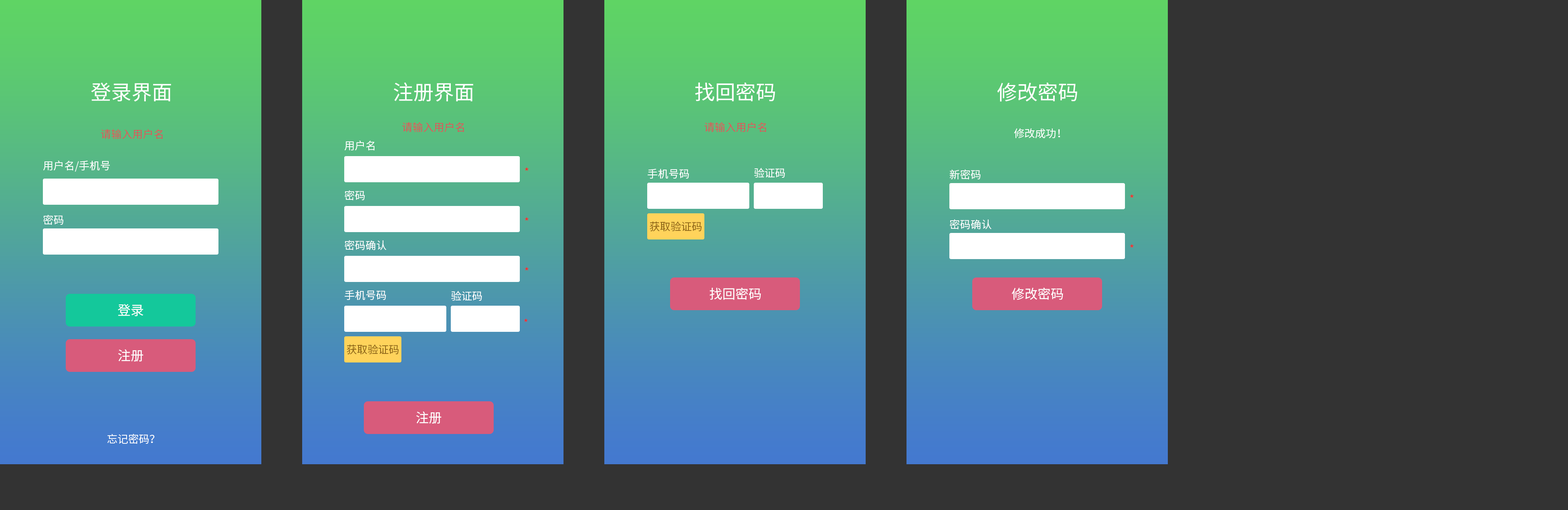
<style>
.page{position:relative;width:1568px;height:510px;background:#333333}
.page>*{position:absolute;margin:0}
.t1{font:20.4px "NotoSansHans-Regular";color:#ffffff}
.t2{font:10.6px "NotoSansHans-Regular";color:#d85b5b}
.t3{font:10.6px "NotoSansHans-Regular";color:#ffffff}
.t4{font:10.6px "NotoSansHans-Regular";color:#ff2424}
.t5{font:10.6px "NotoSansHans-Regular";color:#8e6618}
.t6{font:13.1px "NotoSansHans-Regular";color:#ffffff}
</style>
<div class="page">
<p class="t1" style="left:91px;top:82px;width:80px;height:20px">登录界面</p>
<p class="t1" style="left:394px;top:82px;width:79px;height:20px">注册界面</p>
<p class="t1" style="left:695px;top:82px;width:80px;height:19px">找回密码</p>
<p class="t1" style="left:997px;top:82px;width:80px;height:20px">修改密码</p>
<p class="t2" style="left:402px;top:122px;width:62px;height:10px">请输入用户名</p>
<p class="t2" style="left:704px;top:122px;width:62px;height:10px">请输入用户名</p>
<p class="t2" style="left:101px;top:129px;width:62px;height:10px">请输入用户名</p>
<p class="t3" style="left:1014px;top:128px;width:46px;height:10px">修改成功！</p>
<p class="t3" style="left:345px;top:140px;width:29px;height:10px">用户名</p>
<p class="t3" style="left:43px;top:160px;width:67px;height:12px">用户名/手机号</p>
<p class="t4" style="left:525px;top:167px;width:4px;height:4px">*</p>
<p class="t3" style="left:648px;top:169px;width:41px;height:9px">手机号码</p>
<p class="t3" style="left:754px;top:168px;width:31px;height:10px">验证码</p>
<p class="t3" style="left:949px;top:169px;width:32px;height:10px">新密码</p>
<p class="t3" style="left:345px;top:190px;width:20px;height:10px">密码</p>
<p class="t4" style="left:1130px;top:194px;width:4px;height:4px">*</p>
<p class="t3" style="left:43px;top:214px;width:21px;height:11px">密码</p>
<p class="t4" style="left:525px;top:217px;width:4px;height:3px">*</p>
<p class="t5" style="left:650px;top:221px;width:52px;height:10px">获取验证码</p>
<p class="t3" style="left:950px;top:219px;width:41px;height:10px">密码确认</p>
<p class="t3" style="left:345px;top:240px;width:41px;height:10px">密码确认</p>
<p class="t4" style="left:1130px;top:244px;width:4px;height:3px">*</p>
<p class="t4" style="left:525px;top:267px;width:4px;height:3px">*</p>
<p class="t3" style="left:345px;top:290px;width:41px;height:10px">手机号码</p>
<p class="t3" style="left:451px;top:291px;width:31px;height:10px">验证码</p>
<p class="t6" style="left:710px;top:287px;width:51px;height:13px">找回密码</p>
<p class="t6" style="left:1012px;top:287px;width:51px;height:13px">修改密码</p>
<p class="t6" style="left:118px;top:304px;width:25px;height:12px">登录</p>
<p class="t4" style="left:524px;top:318px;width:4px;height:4px">*</p>
<p class="t6" style="left:118px;top:349px;width:25px;height:12px">注册</p>
<p class="t5" style="left:347px;top:344px;width:52px;height:10px">获取验证码</p>
<p class="t6" style="left:416px;top:411px;width:25px;height:12px">注册</p>
<p class="t3" style="left:107px;top:433px;width:47px;height:10px">忘记密码？</p>
</div>
